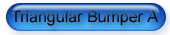
<style>
.page{position:relative;width:170px;height:35px}
.page>*{position:absolute;margin:0}
.t1{font:16px "ArialMT";color:#000000}
</style>
<div class="page">
<p class="t1" style="left:11px;top:10px;width:147px;height:16px">Triangular Bumper A</p>
</div>
